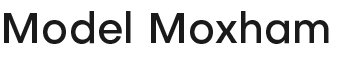
<style>
.page{position:relative;width:344px;height:58px;background:#ffffff}
.page>*{position:absolute;margin:0}
.t1{font:43px "Objectivity-Medium";color:#1a1a1a}
</style>
<div class="page">
<p class="t1" style="left:4px;top:11px;width:325px;height:33px">Model Moxham</p>
</div>
